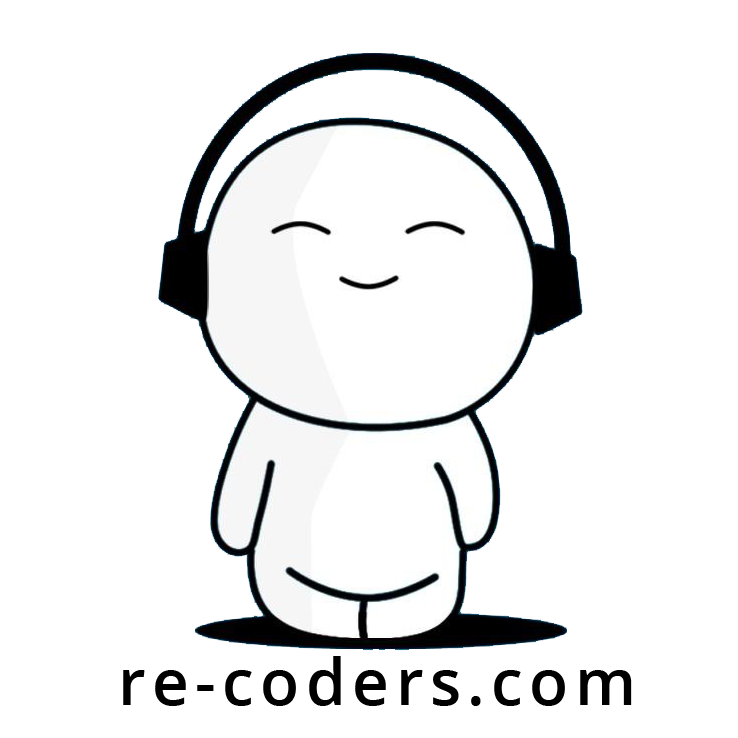
<style>
.page{position:relative;width:738px;height:738px;background:#ffffff}
.page>*{position:absolute;margin:0}
.t1{font:64px "OpenSans-Semibold";letter-spacing:0.1em;color:#000000}
</style>
<div class="page">
<p class="t1" style="left:123px;top:656px;width:509px;height:50px">re-coders.com</p>
</div>
